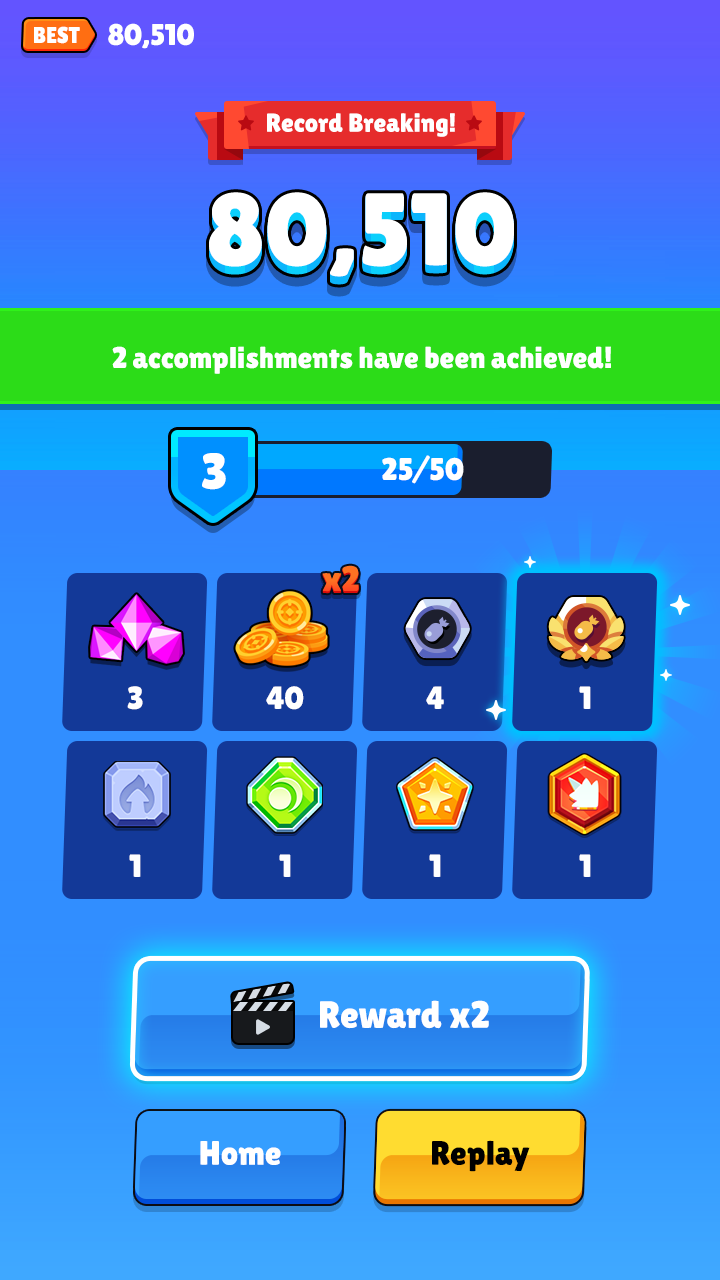
<style>
.page{position:relative;width:720px;height:1280px}
.page>*{position:absolute;margin:0}
.t1{font:23px "LilitaOne";color:#ffffff;text-transform:uppercase}
.t2{font:30px "LilitaOne";color:#ffffff;text-transform:uppercase}
.t3{font:26px "LilitaOne";color:#ffffff}
.t4{font:102.9px "LilitaOne";color:#ffffff}
.t5{font:30px "LilitaOne";color:#ffffff}
.t6{font:50.6px "LilitaOne";color:#ffffff}
.t7{font:31.2px "LilitaOne";color:#ffffff;text-transform:uppercase}
.t8{font:32px "LilitaOne";color:#ffffff;text-transform:uppercase}
.t9{font:38px "LilitaOne";color:#ffffff}
.t10{font:34px "LilitaOne";color:#ffffff}
.t11{font:34px "LilitaOne";color:#000000}
</style>
<div class="page">
<p class="t1" style="left:34px;top:26px;width:46px;height:18px">Best</p>
<p class="t2" style="left:108px;top:23px;width:86px;height:26px">80,510</p>
<p class="t3" style="left:267px;top:113px;width:188px;height:24px">Record Breaking!</p>
<p class="t4" style="left:209px;top:198px;width:305px;height:85px">80,510</p>
<p class="t4" style="left:209px;top:197px;width:305px;height:85px">80,510</p>
<p class="t4" style="left:209px;top:196px;width:305px;height:85px">80,510</p>
<p class="t4" style="left:209px;top:195px;width:305px;height:85px">80,510</p>
<p class="t4" style="left:209px;top:194px;width:305px;height:85px">80,510</p>
<p class="t4" style="left:209px;top:193px;width:305px;height:85px">80,510</p>
<p class="t4" style="left:209px;top:192px;width:305px;height:85px">80,510</p>
<p class="t4" style="left:209px;top:200px;width:305px;height:85px">80,510</p>
<p class="t4" style="left:209px;top:199px;width:305px;height:85px">80,510</p>
<p class="t5" style="left:112px;top:346px;width:499px;height:28px">2 accomplishments have been achieved!</p>
<p class="t6" style="left:202px;top:453px;width:24px;height:37px">3</p>
<p class="t7" style="left:382px;top:455px;width:82px;height:29px">25/50</p>
<p class="t8" style="left:127px;top:686px;width:16px;height:24px">3</p>
<p class="t8" style="left:266px;top:686px;width:38px;height:24px">40</p>
<p class="t8" style="left:426px;top:686px;width:18px;height:23px">4</p>
<p class="t8" style="left:579px;top:686px;width:12px;height:23px">1</p>
<p class="t8" style="left:129px;top:854px;width:12px;height:23px">1</p>
<p class="t8" style="left:279px;top:854px;width:12px;height:23px">1</p>
<p class="t8" style="left:429px;top:854px;width:12px;height:23px">1</p>
<p class="t8" style="left:579px;top:854px;width:12px;height:23px">1</p>
<p class="t9" style="left:320px;top:1000px;width:169px;height:29px">Reward x2</p>
<p class="t10" style="left:200px;top:1141px;width:81px;height:24px">Home</p>
<p class="t11" style="left:432px;top:1140px;width:98px;height:32px">Replay</p>
</div>
